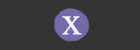
<style>
.page{position:relative;width:140px;height:50px;background:#333333}
.page>*{position:absolute;margin:0}
.t1{font:40px "TimesNewRomanPSMT";color:#f5f5f9}
.t2{font:40px "ScriptMTStd-Bold";color:#f5f5f9}
</style>
<div class="page">
<p class="t1" style="left:62px;top:16px;width:20px;height:19px"><span class="t2">           </span>x</p>
</div>
